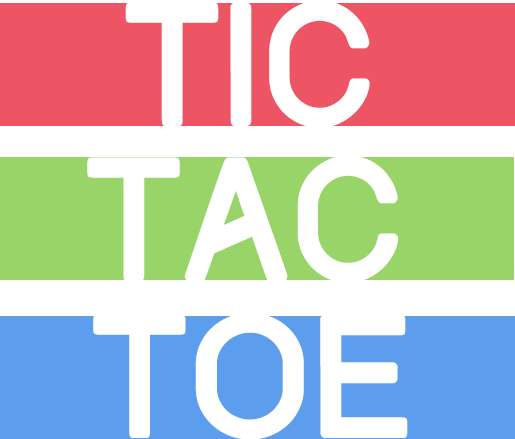
<style>
.page{position:relative;width:515px;height:439px;background:#ffffff}
.page>*{position:absolute;margin:0}
.t1{font:154.2px "Track";color:#ffffff}
</style>
<div class="page">
<p class="t1" style="left:125px;top:0px;width:245px;height:128px">TIC</p>
<p class="t1" style="left:87px;top:155px;width:311px;height:128px">TAC</p>
<p class="t1" style="left:93px;top:312px;width:315px;height:128px">TOE</p>
</div>
